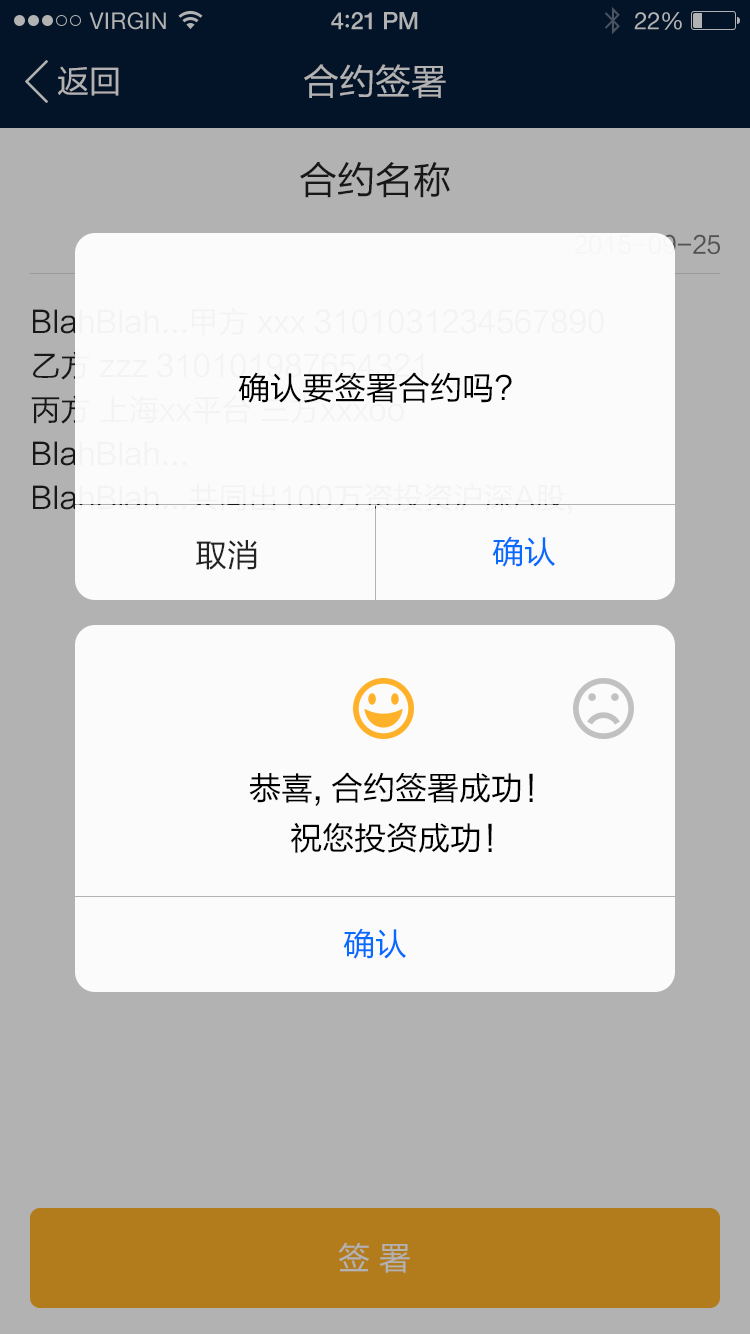
<style>
.page{position:relative;width:750px;height:1334px;background:#fbfbfb}
.page>*{position:absolute;margin:0}
.t1{font:36px "FZLTHK--GBK1-0";color:#b2b2b2}
.t2{font:32px "FZLTHK--GBK1-0";color:#b2b2b2}
.t3{font:38px "FZLTHK--GBK1-0";color:#222222}
.t4{font:32px "FZLTHK--GBK1-0";color:#000000}
.t5{font:32px "FZLTHK--GBK1-0";color:#222222}
.t6{font:32px "FZLTHK--GBK1-0";color:#086bff}
.t7{font:32px/50px "FZLTHK--GBK1-0";color:#000000}
</style>
<div class="page">
<p class="t1" style="left:304px;top:64px;width:142px;height:34px">合约签署</p>
<p class="t2" style="left:58px;top:66px;width:61px;height:30px">返回</p>
<p class="t3" style="left:300px;top:162px;width:150px;height:36px">合约名称</p>
<p class="t4" style="left:238px;top:372px;width:274px;height:31px">确认要签署合约吗?</p>
<p class="t5" style="left:196px;top:540px;width:61px;height:30px">取消</p>
<p class="t6" style="left:492px;top:536px;width:63px;height:31px">确认</p>
<p class="t7" style="left:249px;top:772px;width:284px;height:81px;text-align:center">恭喜, 合约签署成功！<br>祝您投资成功！</p>
<p class="t6" style="left:343px;top:928px;width:63px;height:31px">确认</p>
<p class="t2" style="left:338px;top:1242px;width:72px;height:31px">签 署</p>
</div>
